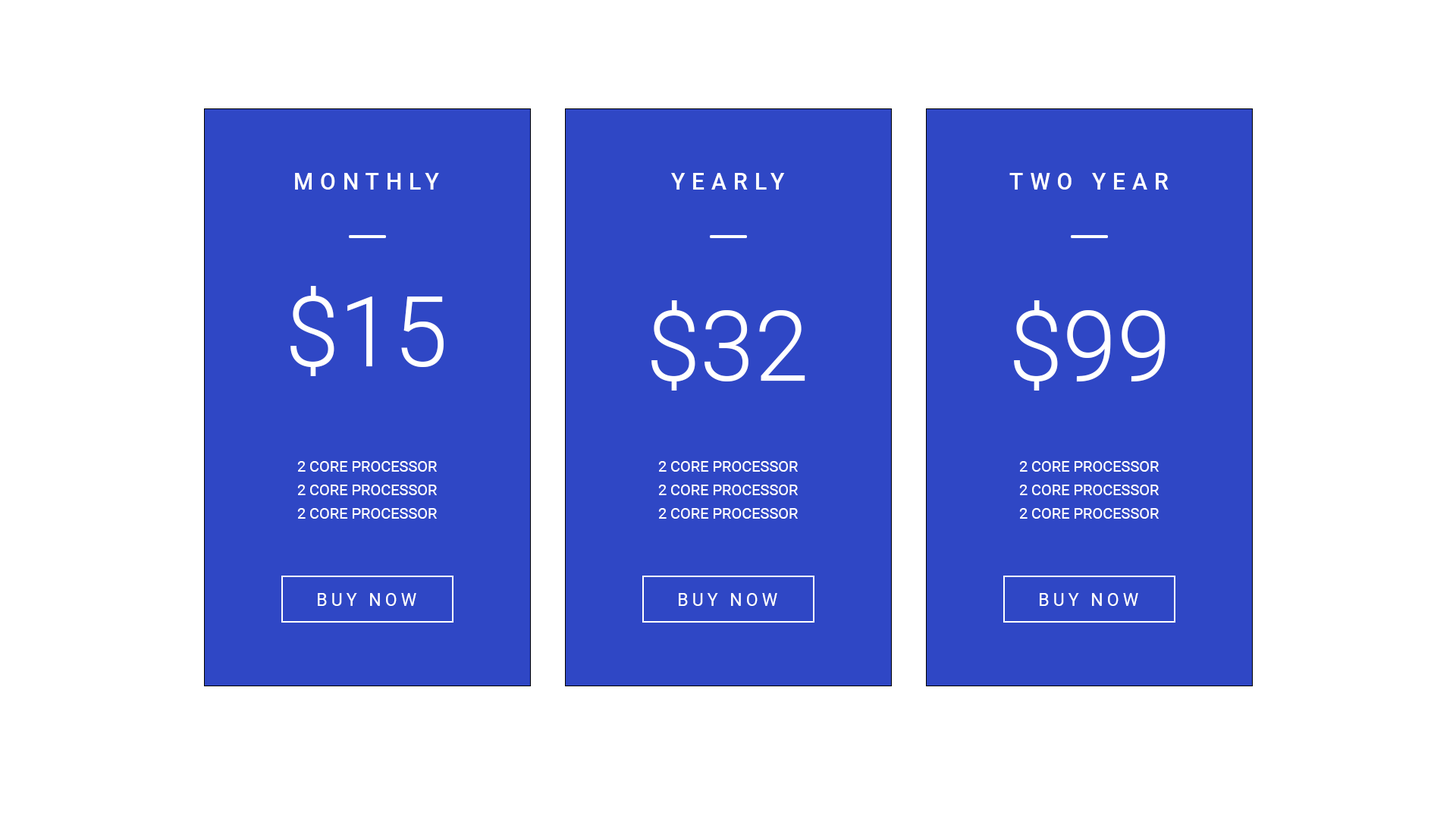
<style>
.page{position:relative;width:1456px;height:819px;background:#ffffff}
.page>*{position:absolute;margin:0}
.t1{font:22.7px "Roboto-Medium";letter-spacing:0.3em;color:#ffffff}
.t2{font:97.8px "Roboto-Light";color:#ffffff}
.t3{font:15.2px "Roboto-Regular";color:#ffffff}
.t4{font:17.4px "Roboto-Regular";letter-spacing:0.22em;color:#ffffff}
</style>
<div class="page">
<p class="t1" style="left:295px;top:173px;width:144px;height:17px">MONTHLY</p>
<p class="t1" style="left:671px;top:173px;width:114px;height:17px">YEARLY</p>
<p class="t1" style="left:1009px;top:173px;width:160px;height:17px">TWO YEAR</p>
<p class="t2" style="left:290px;top:286px;width:154px;height:90px">$15</p>
<p class="t2" style="left:651px;top:300px;width:154px;height:91px">$32</p>
<p class="t2" style="left:1014px;top:300px;width:152px;height:91px">$99</p>
<p class="t3" style="left:297px;top:461px;width:140px;height:11px">2 CORE PROCESSOR</p>
<p class="t3" style="left:658px;top:461px;width:140px;height:11px">2 CORE PROCESSOR</p>
<p class="t3" style="left:1019px;top:461px;width:140px;height:11px">2 CORE PROCESSOR</p>
<p class="t3" style="left:297px;top:485px;width:140px;height:10px">2 CORE PROCESSOR</p>
<p class="t3" style="left:658px;top:485px;width:140px;height:10px">2 CORE PROCESSOR</p>
<p class="t3" style="left:1019px;top:485px;width:140px;height:10px">2 CORE PROCESSOR</p>
<p class="t3" style="left:297px;top:508px;width:140px;height:11px">2 CORE PROCESSOR</p>
<p class="t3" style="left:658px;top:508px;width:140px;height:11px">2 CORE PROCESSOR</p>
<p class="t3" style="left:1019px;top:508px;width:140px;height:11px">2 CORE PROCESSOR</p>
<p class="t4" style="left:318px;top:593px;width:98px;height:13px">BUY NOW</p>
<p class="t4" style="left:679px;top:593px;width:98px;height:13px">BUY NOW</p>
<p class="t4" style="left:1040px;top:593px;width:98px;height:13px">BUY NOW</p>
</div>
